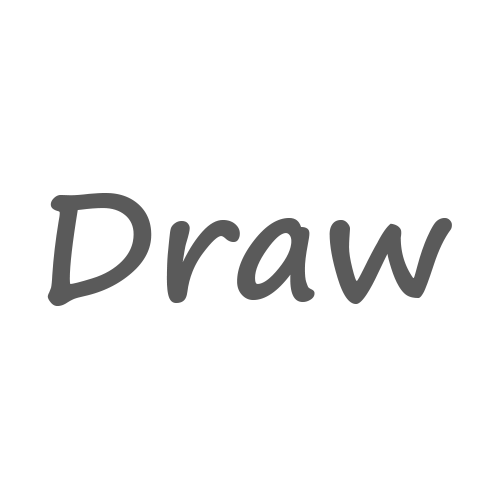
<style>
.page{position:relative;width:500px;height:500px;background:#ffffff}
.page>*{position:absolute;margin:0}
.t1{font:150px "SegoePrint-Bold";color:#5a5a5a}
</style>
<div class="page">
<p class="t1" style="left:47px;top:193px;width:405px;height:113px">Draw</p>
</div>
